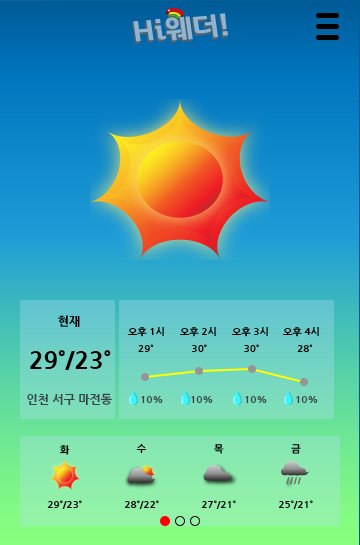
<style>
.page{position:relative;width:360px;height:545px}
.page>*{position:absolute;margin:0}
.t1{font:12px "NanumGothicExtraBold";color:#000000}
.t2{font:10px "NanumGothicExtraBold";color:#000000}
.t3{font:24px "NanumGothicExtraBold";color:#000000}
.t4{font:12px "NanumGothicExtraBold";color:#38444c}
.t5{font:10px "NanumGothicExtraBold";color:#38444c}
</style>
<div class="page">
<p class="t1" style="left:58px;top:315px;width:22px;height:12px">현재</p>
<p class="t2" style="left:128px;top:327px;width:36px;height:10px">오후 1시</p>
<p class="t2" style="left:180px;top:327px;width:36px;height:10px">오후 2시</p>
<p class="t2" style="left:232px;top:327px;width:36px;height:10px">오후 3시</p>
<p class="t2" style="left:283px;top:327px;width:36px;height:10px">오후 4시</p>
<p class="t3" style="left:30px;top:350px;width:81px;height:20px">29˚/23˚</p>
<p class="t2" style="left:138px;top:344px;width:16px;height:8px">29˚</p>
<p class="t2" style="left:192px;top:344px;width:15px;height:8px">30˚</p>
<p class="t2" style="left:244px;top:344px;width:15px;height:8px">30˚</p>
<p class="t2" style="left:297px;top:344px;width:16px;height:8px">28˚</p>
<p class="t4" style="left:27px;top:393px;width:85px;height:12px">인천 서구 마전동</p>
<p class="t5" style="left:141px;top:396px;width:22px;height:7px">10%</p>
<p class="t5" style="left:191px;top:396px;width:22px;height:7px">10%</p>
<p class="t5" style="left:245px;top:396px;width:22px;height:7px">10%</p>
<p class="t5" style="left:296px;top:396px;width:22px;height:7px">10%</p>
<p class="t2" style="left:60px;top:445px;width:10px;height:10px">화</p>
<p class="t2" style="left:136px;top:444px;width:11px;height:9px">수</p>
<p class="t2" style="left:214px;top:444px;width:10px;height:10px">목</p>
<p class="t2" style="left:291px;top:444px;width:10px;height:10px">금</p>
<p class="t2" style="left:47px;top:500px;width:35px;height:9px">29˚/23˚</p>
<p class="t2" style="left:124px;top:500px;width:35px;height:9px">28˚/22˚</p>
<p class="t2" style="left:201px;top:500px;width:35px;height:9px">27˚/21˚</p>
<p class="t2" style="left:278px;top:500px;width:35px;height:9px">25˚/21˚</p>
</div>
